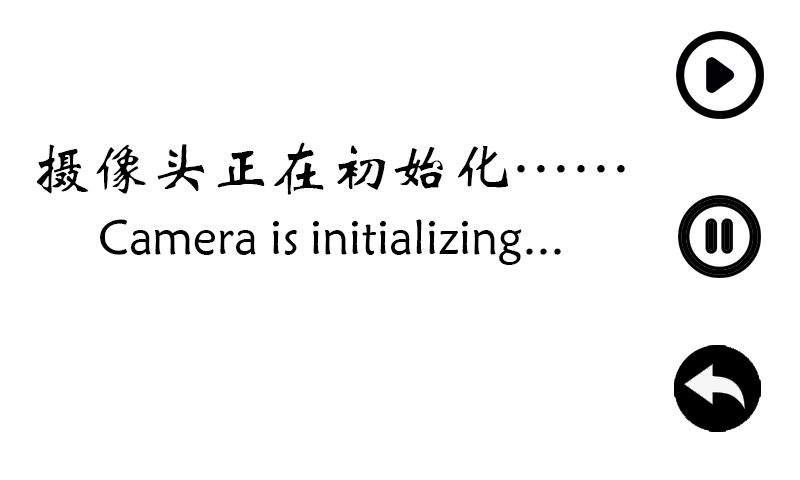
<style>
.page{position:relative;width:800px;height:480px;background:#ffffff}
.page>*{position:absolute;margin:0}
.t1{font:60px "STXinwei";color:#000000}
.t2{font:48px "STXinwei";color:#000000}
</style>
<div class="page">
<p class="t1" style="left:36px;top:142px;width:589px;height:53px">摄像头正在初始化……</p>
<p class="t2" style="left:100px;top:219px;width:461px;height:46px">Camera is initializing...</p>
</div>
